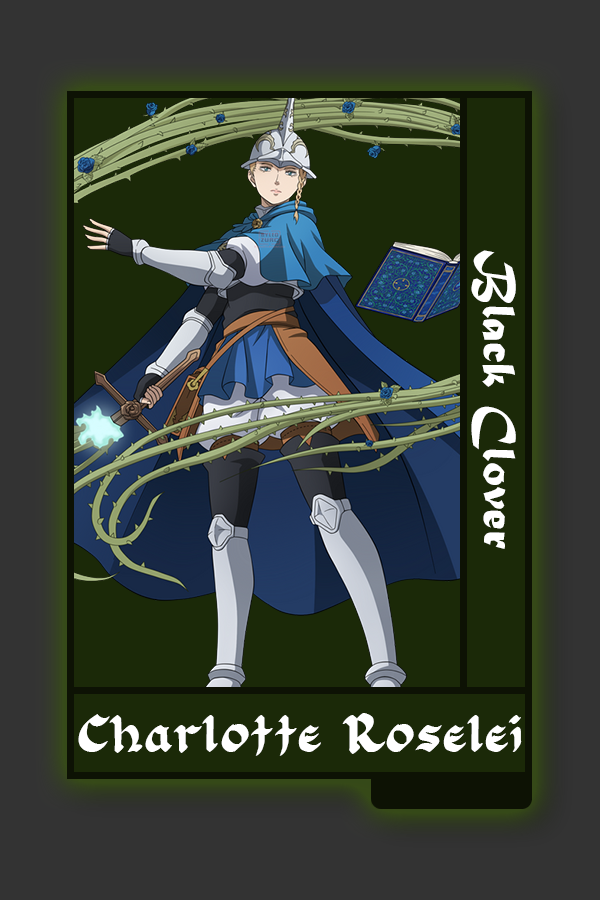
<style>
.page{position:relative;width:600px;height:900px;background:#1b2908}
.page>*{position:absolute;margin:0}
.t1{font:48.8px "MaturaMTScriptCapitals";color:#ffffff}
.t2{font:44.9px "FloranteatLaura";color:#ffffff}
</style>
<div class="page">
<p class="t1" style="left:471px;top:250px;width:45px;height:299px;rotate:90deg">Black Clover</p>
<p class="t2" style="left:78px;top:713px;width:444px;height:43px">Charlotte Roselei</p>
</div>
